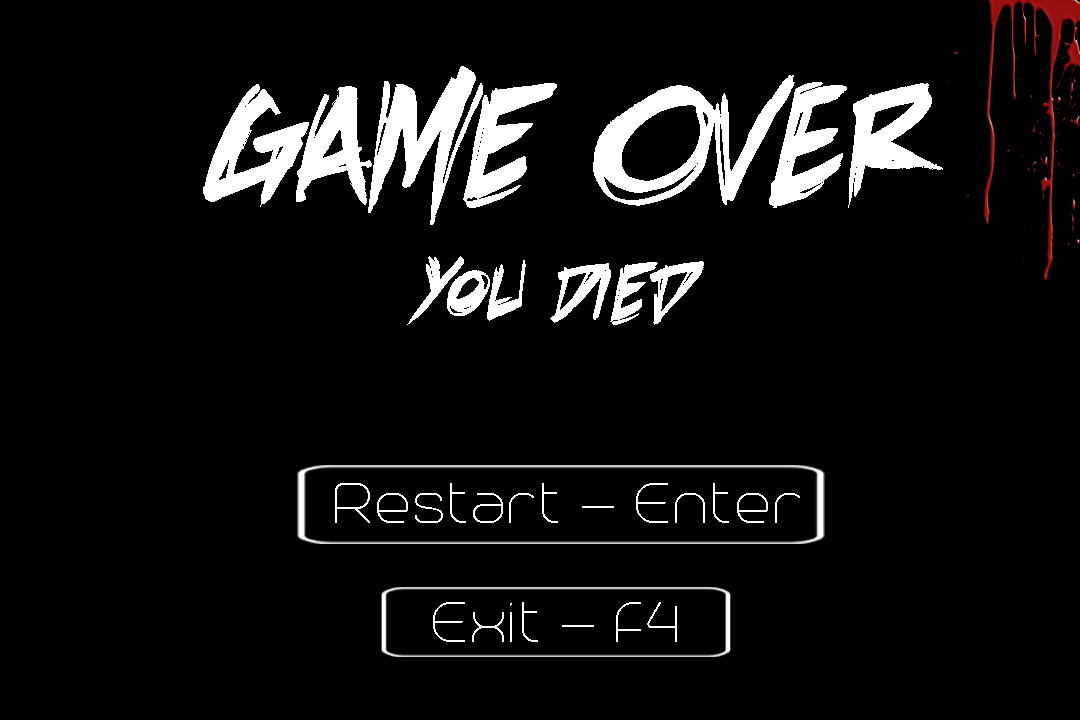
<style>
.page{position:relative;width:1080px;height:720px;background:#000000}
.page>*{position:absolute;margin:0}
.t1{font:200px "DeathRattleBB";color:#ffffff}
.t2{font:100px "DeathRattleBB";color:#ffffff}
.t3{font:72px "Trench-Thin";color:#ffffff}
</style>
<div class="page">
<p class="t1" style="left:203px;top:66px;width:740px;height:159px">Game OVER</p>
<p class="t2" style="left:407px;top:256px;width:297px;height:69px">You Died</p>
<p class="t3" style="left:335px;top:483px;width:465px;height:40px">Restart - Enter</p>
<p class="t3" style="left:433px;top:602px;width:244px;height:40px">Exit - F4</p>
</div>
